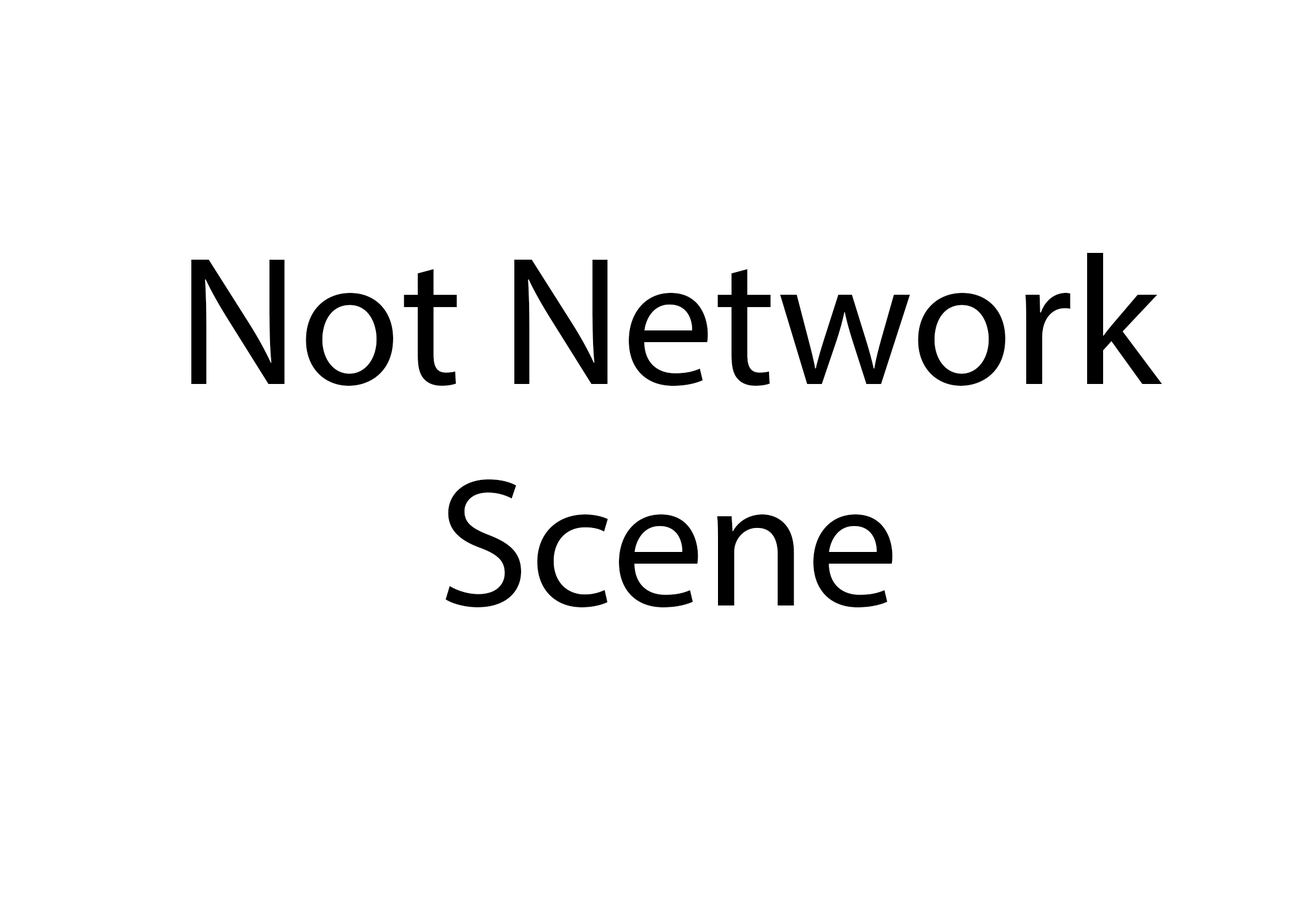
<style>
.page{position:relative;width:1292px;height:923px;background:#ffffff}
.page>*{position:absolute;margin:0}
.t1{font:184.6px "MyriadPro-Regular";color:#000000}
</style>
<div class="page">
<p class="t1" style="left:191px;top:253px;width:971px;height:355px;text-align:center">Not Network Scene</p>
</div>
